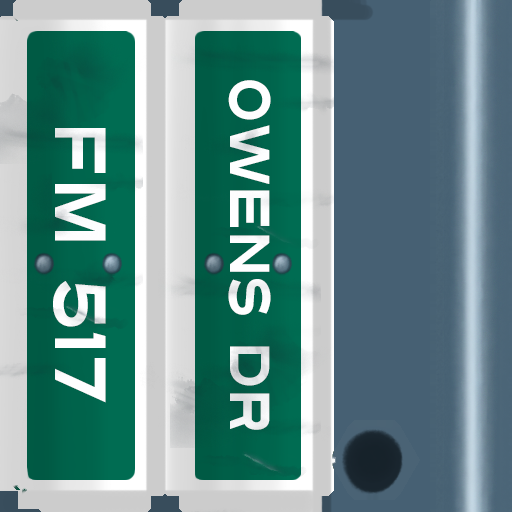
<style>
.page{position:relative;width:512px;height:512px}
.page>*{position:absolute;margin:0}
.t1{font:56px "Turnpike";color:#fefeff;scale:0.75 1}
.t2{font:72px "Turnpike";color:#fefeff;scale:0.75 1}
</style>
<div class="page">
<p class="t1" style="left:228px;top:80px;width:43px;height:350px;rotate:90deg">Owens DR</p>
<p class="t2" style="left:53px;top:128px;width:53px;height:275px;rotate:90deg">fm 517</p>
</div>
